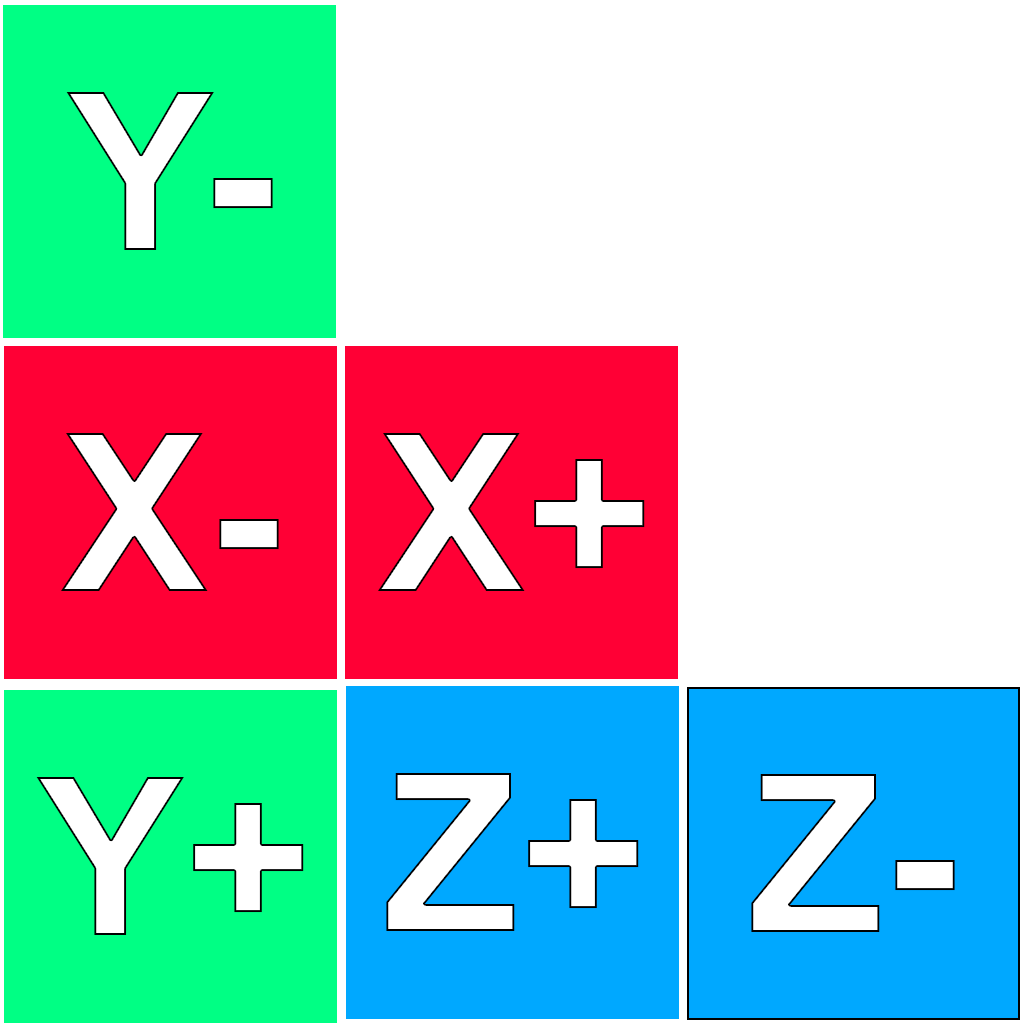
<style>
.page{position:relative;width:1024px;height:1024px;background:#ffffff}
.page>*{position:absolute;margin:0}
.t1{font:220px "Arial-BoldMT";color:#ffffff}
</style>
<div class="page">
<p class="t1" style="left:66px;top:92px;width:207px;height:158px">Y-</p>
<p class="t1" style="left:60px;top:433px;width:219px;height:158px">X-</p>
<p class="t1" style="left:377px;top:433px;width:268px;height:158px">X+</p>
<p class="t1" style="left:386px;top:773px;width:253px;height:158px">Z+</p>
<p class="t1" style="left:751px;top:774px;width:204px;height:158px">Z-</p>
<p class="t1" style="left:36px;top:777px;width:268px;height:158px">Y+</p>
</div>
